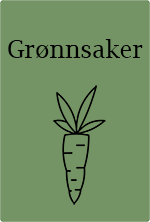
<style>
.page{position:relative;width:150px;height:222px;background:#749465}
.page>*{position:absolute;margin:0}
.t1{font:24px "LucidaBright";color:#000000}
.t2{font:36px "LucidaBright";color:#000000}
</style>
<div class="page">
<p class="t1" style="left:8px;top:39px;width:135px;height:19px"><span class="t2"><br></span>Grønnsaker</p>
</div>
